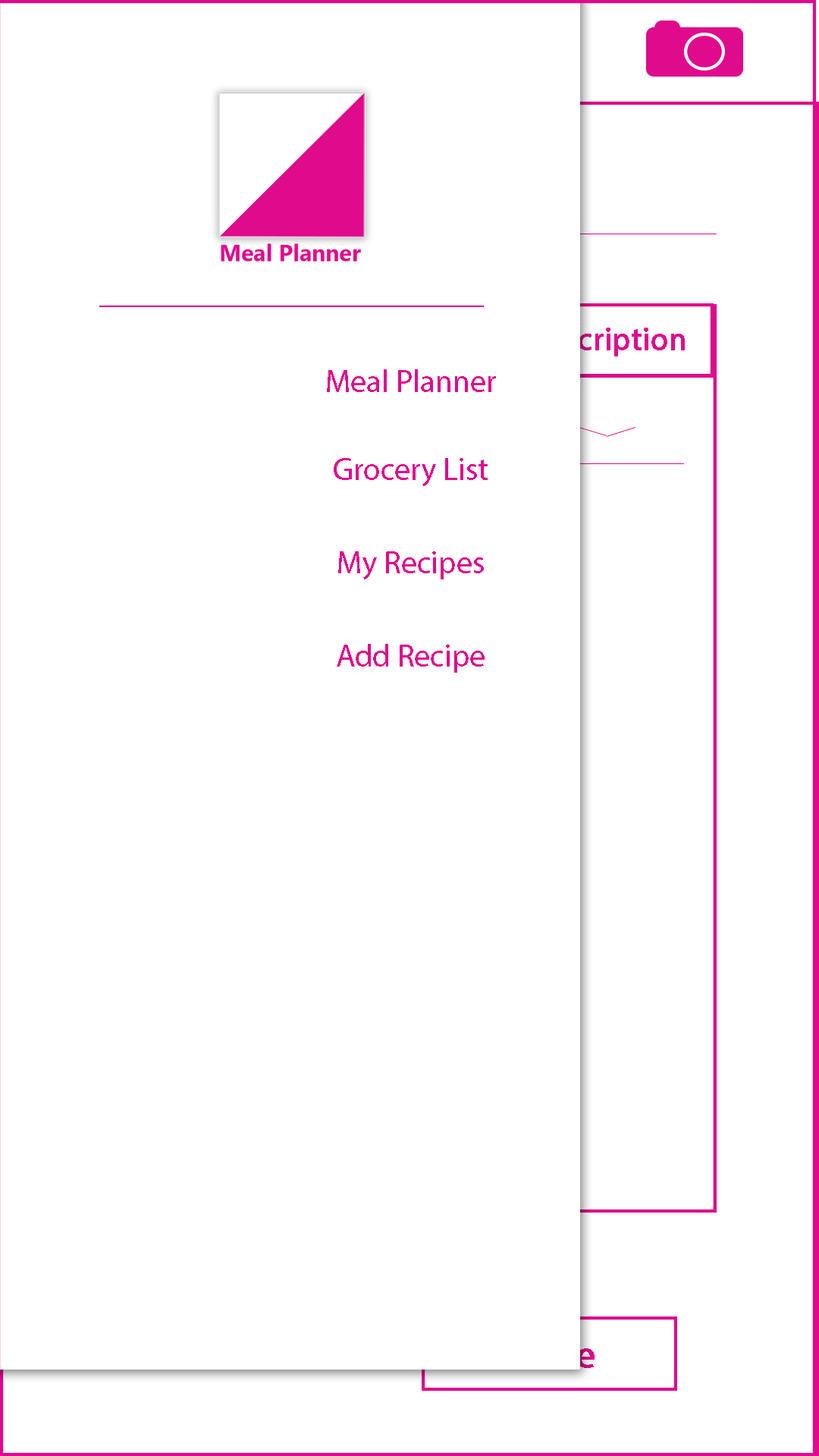
<style>
.page{position:relative;width:819px;height:1456px;background:#ffffff}
.page>*{position:absolute;margin:0}
.t1{font:31.6px "MyriadPro-Regular";font-weight:bold}
.t2{font:31.6px "MyriadPro-Regular";color:#e00a8d}
</style>
<div class="page">
<p class="t1" style="left:467px;top:327px;width:218px;height:29px">Edit  Discription</p>
<p class="t2" style="left:327px;top:369px;width:169px;height:23px">Meal Planner</p>
<p class="t2" style="left:334px;top:458px;width:154px;height:28px">Grocery List</p>
<p class="t2" style="left:338px;top:551px;width:146px;height:28px">My Recipes</p>
<p class="t2" style="left:337px;top:644px;width:148px;height:29px">Add Recipe</p>
</div>
